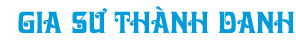
<style>
.page{position:relative;width:296px;height:40px;background:#ffffff}
.page>*{position:absolute;margin:0}
.t1{font:30px "UTM-Davida";color:#009cd9}
</style>
<div class="page">
<p class="t1" style="left:18px;top:6px;width:276px;height:28px">GIA SƯ THÀNH DANH</p>
</div>
